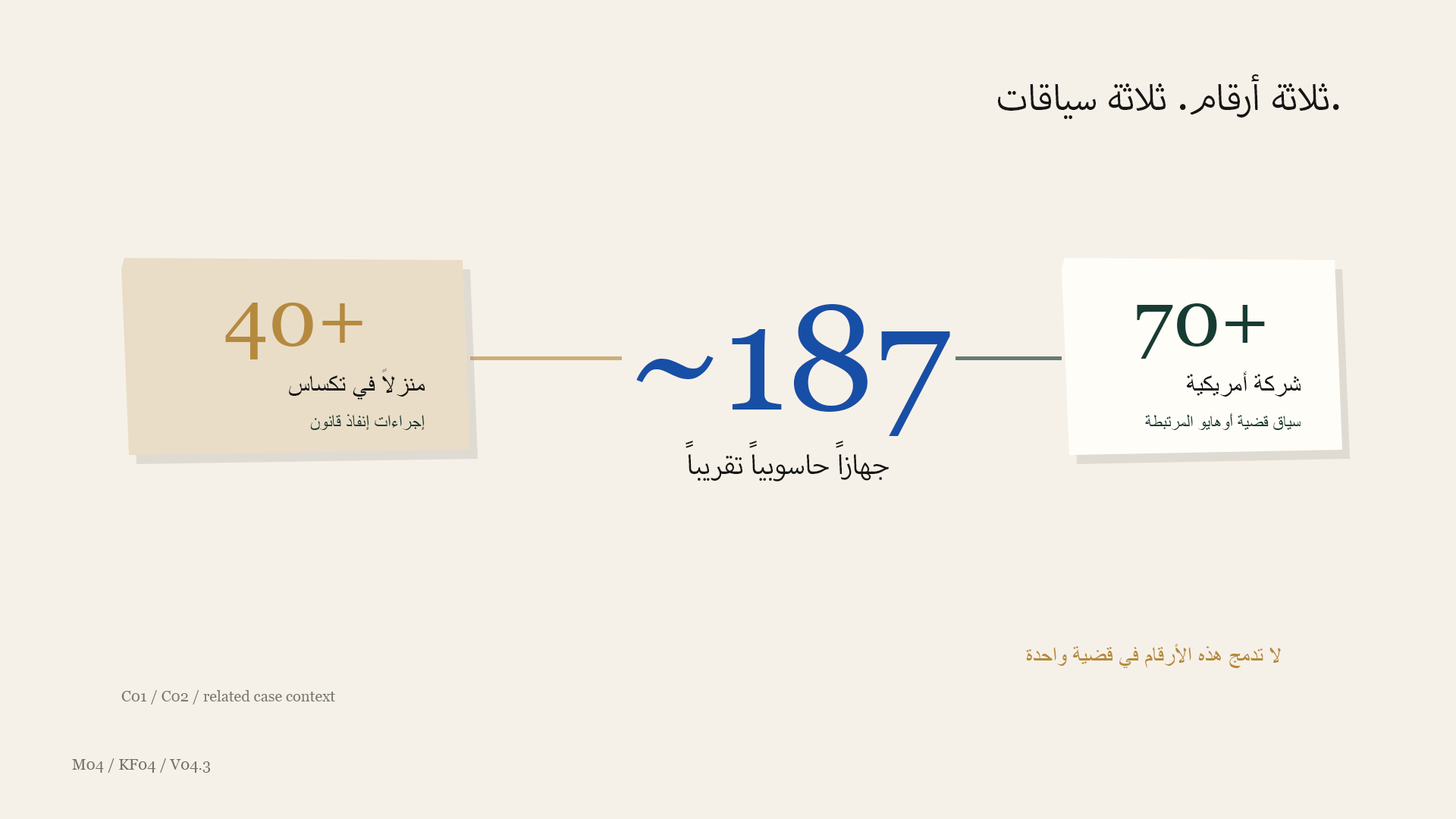
<style>
.page{position:relative;width:1456px;height:819px;background:#f6f1e8}
.page>*{position:absolute;margin:0}
.t1{font:50px "MyriadArabic-Regular";color:#151515}
.t2{font:78.9px "Georgia";color:#b58a3e}
.t3{font:148.6px "Georgia";color:#174fa6}
.t4{font:77.3px "Georgia";color:#173c32}
.t5{font:25.8px "ArialMT";color:#151515}
.t6{font:17.4px "ArialMT";color:#173c32}
.t7{font:18.2px "ArialMT";color:#173c32}
.t8{font:37.9px "MyriadArabic-Regular";color:#151515}
.t9{font:22.7px "ArialMT";color:#b58a3e}
.t10{font:15.2px "Georgia";color:#7b7974}
.t11{font:15.2px "Georgia";color:#716f6b}
</style>
<div class="page">
<p class="t1" style="left:998px;top:74px;width:341px;height:45px">ثلاثة أرقام. ثلاثة سياقات.</p>
<p class="t2" style="left:225px;top:303px;width:137px;height:56px">40+</p>
<p class="t3" style="left:636px;top:304px;width:314px;height:132px">~187</p>
<p class="t4" style="left:1137px;top:303px;width:128px;height:56px">70+</p>
<p class="t5" style="left:289px;top:369px;width:136px;height:31px">منزلاً في تكساس</p>
<p class="t5" style="left:1186px;top:372px;width:115px;height:25px">شركة أمريكية</p>
<p class="t6" style="left:1145px;top:413px;width:156px;height:17px">سياق قضية أوهايو المرتبطة</p>
<p class="t7" style="left:310px;top:414px;width:115px;height:16px">إجراءات إنفاذ قانون</p>
<p class="t8" style="left:686px;top:441px;width:203px;height:41px">جهازاً حاسوبياً تقريباً</p>
<p class="t9" style="left:1026px;top:644px;width:255px;height:24px">لا تدمج هذه الأرقام في قضية واحدة</p>
<p class="t10" style="left:121px;top:690px;width:214px;height:14px">C01 / C02 / related case context</p>
<p class="t11" style="left:72px;top:758px;width:138px;height:15px">M04 / KF04 / V04.3</p>
</div>
